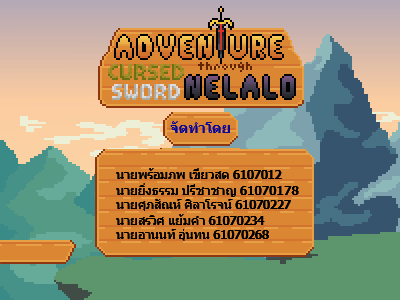
<style>
.page{position:relative;width:400px;height:300px}
.page>*{position:absolute;margin:0}
.t1{font:13.6px "Tahoma-Bold";color:#0b079a}
.t2{font:11.6px "Tahoma-Bold";color:#000000}
</style>
<div class="page">
<p class="t1" style="left:170px;top:121px;width:60px;height:12px">จัดทำโดย</p>
<p class="t2" style="left:116px;top:168px;width:166px;height:11px">นายพร้อมภพ เขียวสด 6107012</p>
<p class="t2" style="left:116px;top:183px;width:183px;height:14px">นายยิ่งธรรม ปรีชาชาญ 61070178</p>
<p class="t2" style="left:116px;top:199px;width:175px;height:12px">นายศุภสัณห์ ศิลาโรจน์ 61070227</p>
<p class="t2" style="left:116px;top:214px;width:149px;height:11px">นายสรวิศ แย้มคํา 61070234</p>
<p class="t2" style="left:116px;top:229px;width:153px;height:12px">นายอานนท์ อุ่นทน 61070268</p>
</div>
